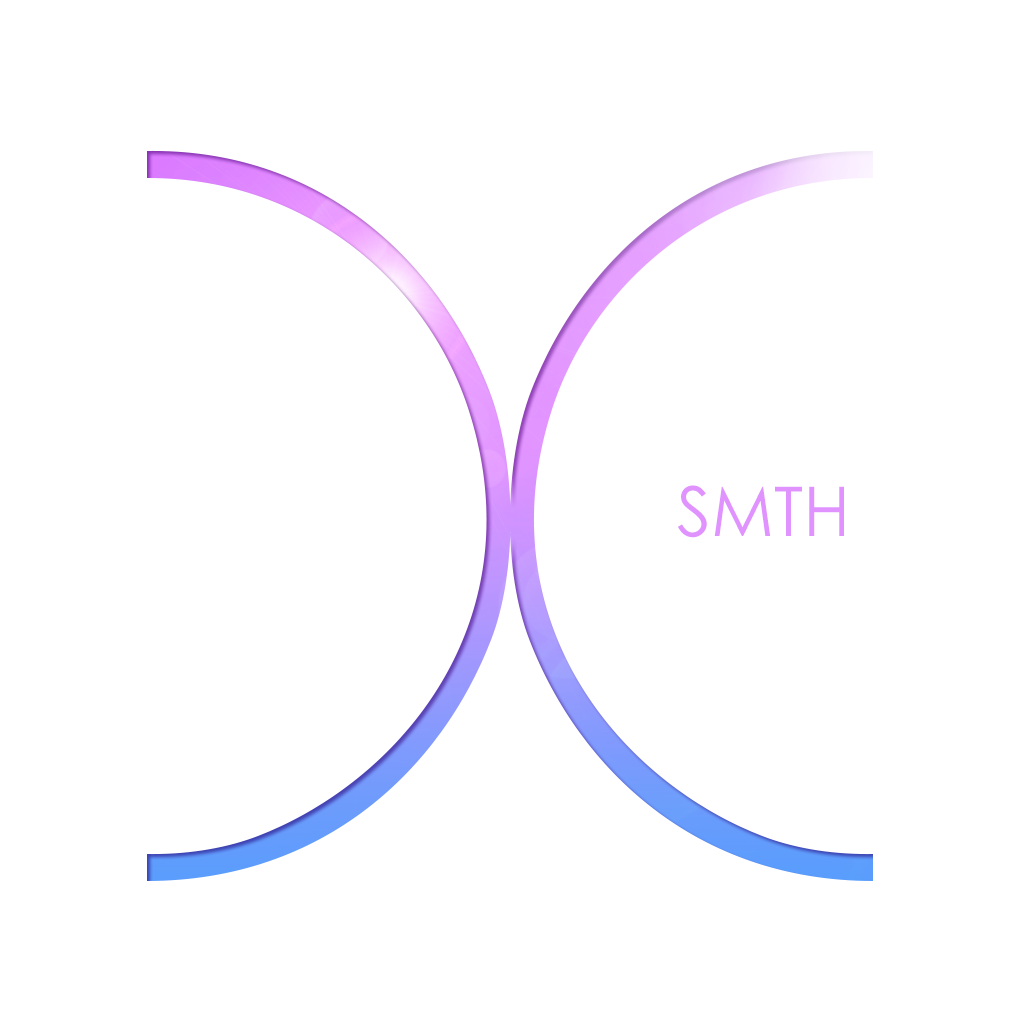
<style>
.page{position:relative;width:1024px;height:1024px;background:#ffffff}
.page>*{position:absolute;margin:0}
.t1{font:68.7px "STXihei";color:#e092ff}
</style>
<div class="page">
<p class="t1" style="left:678px;top:485px;width:166px;height:53px">SMTH</p>
</div>
